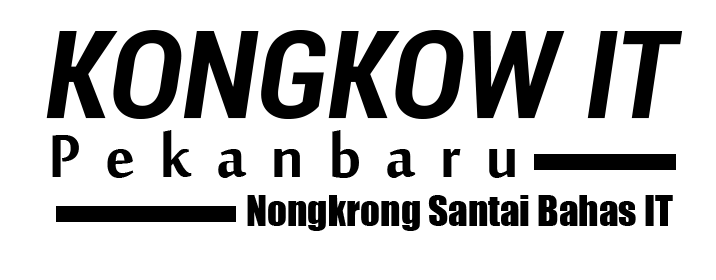
<style>
.page{position:relative;width:716px;height:280px;background:#ffffff}
.page>*{position:absolute;margin:0}
.t1{font:122px "Roboto-BoldCondensedItalic";color:#000000}
.t2{font:92px "MoolBoran";letter-spacing:0.26em;color:#000000}
.t3{font:39px "Impact";color:#000000}
</style>
<div class="page">
<p class="t1" style="left:46px;top:30px;width:637px;height:89px">KONGKOW IT</p>
<p class="t2" style="left:52px;top:130px;width:463px;height:48px">Pekanbaru</p>
<p class="t3" style="left:247px;top:195px;width:426px;height:36px">Nongkrong Santai Bahas IT</p>
</div>
